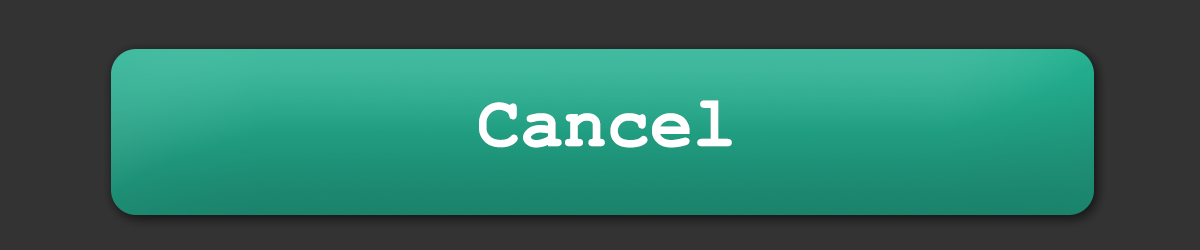
<style>
.page{position:relative;width:1200px;height:250px;background:#333333}
.page>*{position:absolute;margin:0}
.t1{font:72px "CourierNewPS-BoldMT";color:#ffffff}
</style>
<div class="page">
<p class="t1" style="left:479px;top:100px;width:253px;height:48px">Cancel</p>
</div>
